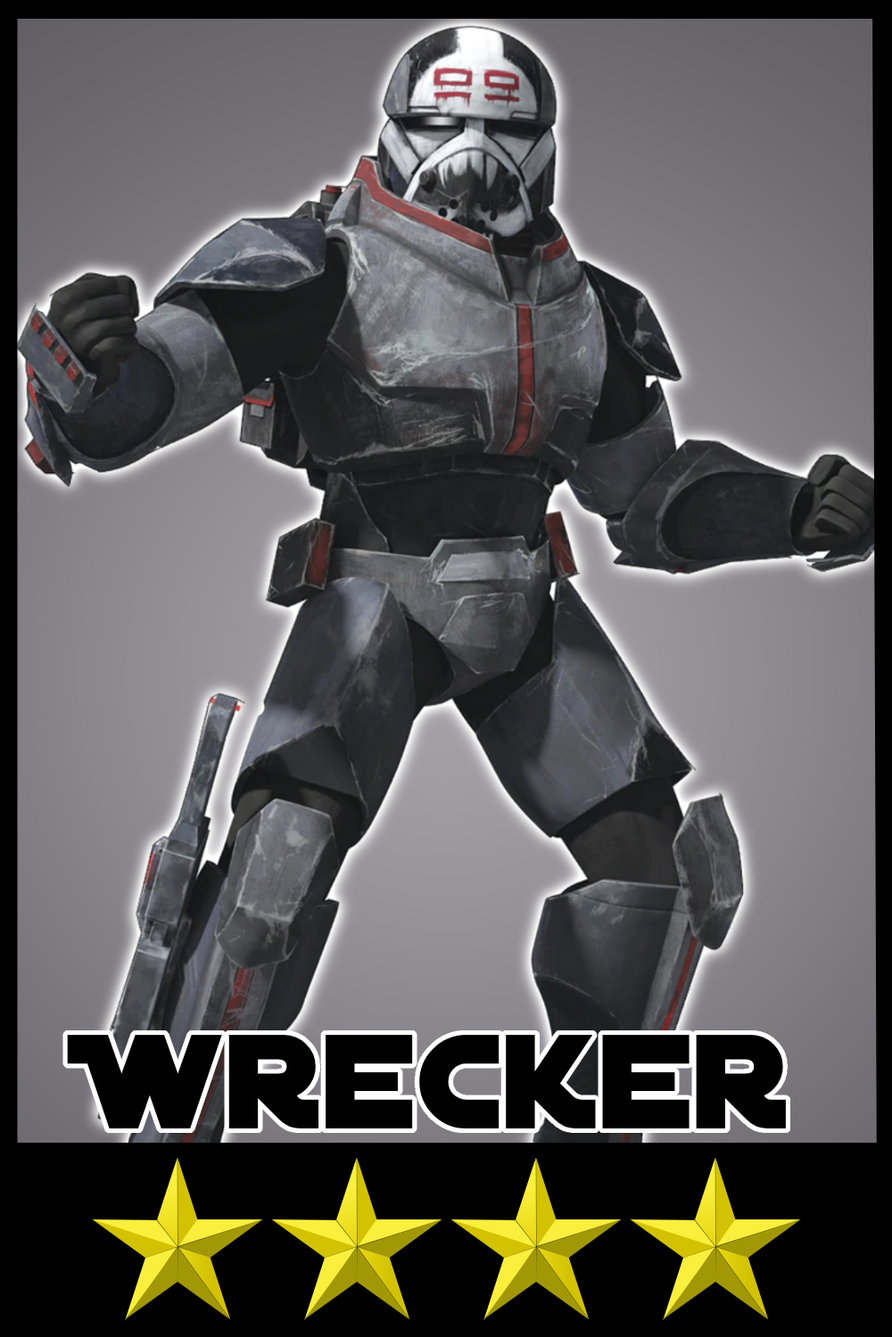
<style>
.page{position:relative;width:892px;height:1337px}
.page>*{position:absolute;margin:0}
.t1{font:144.2px "DistantGalaxy";color:#000000}
</style>
<div class="page">
<p class="t1" style="left:67px;top:1035px;width:719px;height:94px">Wrecker</p>
</div>
